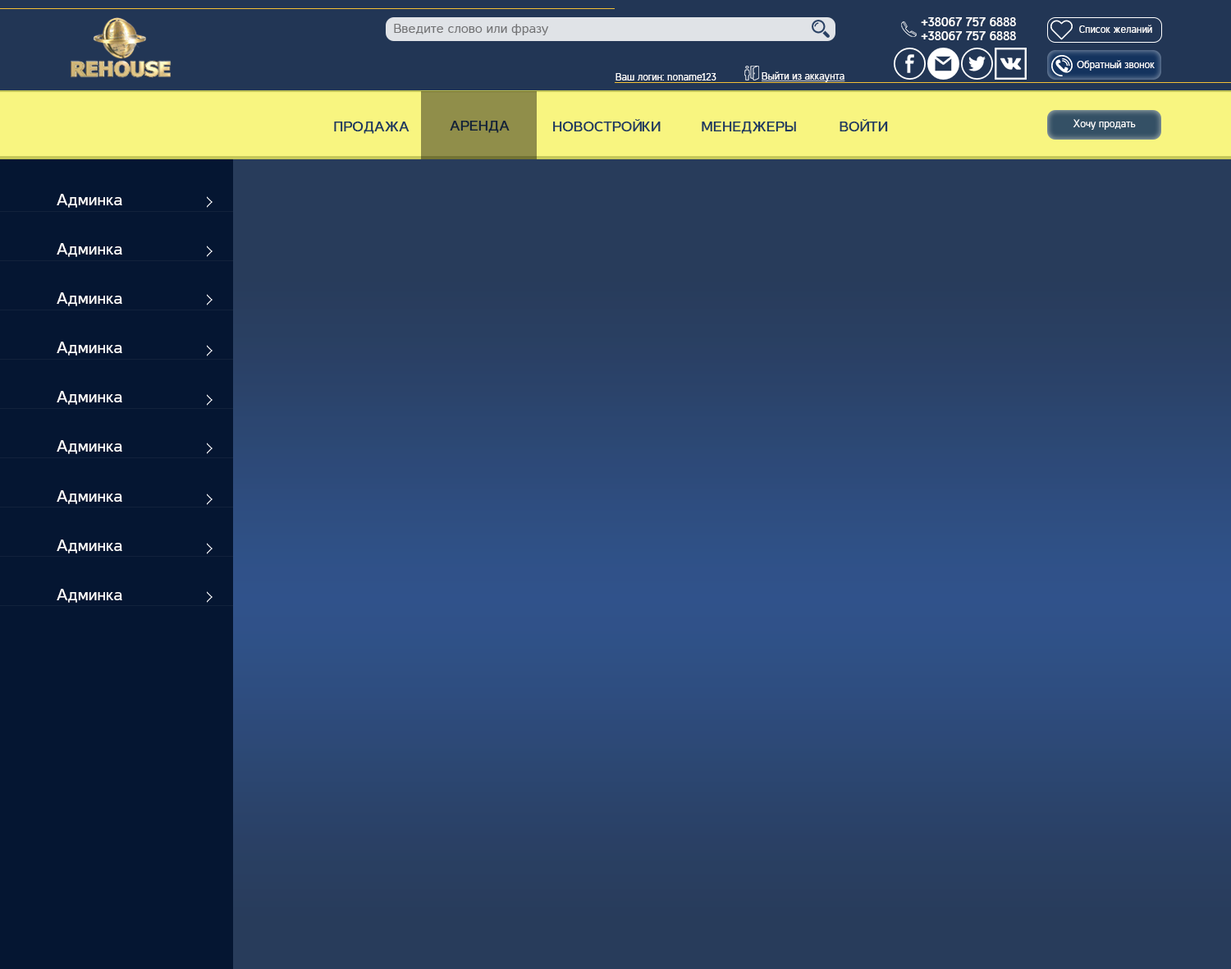
<style>
.page{position:relative;width:1231px;height:969px}
.page>*{position:absolute;margin:0}
.t1{font:13.1px "CasperBold";color:#ffffff}
.t2{font:13.1px "Casper";color:#727274}
.t3{font:13.1px "Casper";color:#727274;text-transform:uppercase}
.t4{font:9.8px "Casper";color:#ffffff}
.t5{font:9.8px "Casper";color:#ffffff;text-decoration:underline}
.t6{font:14.8px "CasperBold";color:#1d3960;text-transform:uppercase}
.t7{font:14.8px "CasperBold";color:#112138;text-transform:uppercase}
.t8{font:16.4px "Casper";color:#ffffff}
</style>
<div class="page">
<p class="t1" style="left:921px;top:17px;width:95px;height:9px">+38067 757 6888</p>
<p class="t2" style="left:394px;top:24px;width:155px;height:11px"><span class="t3">В</span>ведите слово или фразу</p>
<p class="t4" style="left:1079px;top:25px;width:73px;height:8px">Список желаний</p>
<p class="t1" style="left:921px;top:31px;width:95px;height:9px">+38067 757 6888</p>
<p class="t4" style="left:1077px;top:60px;width:78px;height:11px">Обратный звонок</p>
<p class="t4" style="left:616px;top:73px;width:101px;height:7px">Ваш логин: noname123</p>
<p class="t5" style="left:762px;top:71px;width:83px;height:11px">Выйти из аккаунта</p>
<p class="t6" style="left:334px;top:121px;width:76px;height:13px">Продажа</p>
<p class="t7" style="left:450px;top:121px;width:60px;height:12px">аренда</p>
<p class="t6" style="left:553px;top:119px;width:108px;height:12px">новостройки</p>
<p class="t6" style="left:702px;top:121px;width:94px;height:13px">менеджеры</p>
<p class="t6" style="left:840px;top:119px;width:48px;height:12px">войти</p>
<p class="t4" style="left:1073px;top:119px;width:63px;height:11px">Хочу продать</p>
<p class="t8" style="left:57px;top:194px;width:65px;height:14px">Админка</p>
<p class="t8" style="left:57px;top:243px;width:65px;height:14px">Админка</p>
<p class="t8" style="left:57px;top:292px;width:65px;height:14px">Админка</p>
<p class="t8" style="left:57px;top:341px;width:65px;height:14px">Админка</p>
<p class="t8" style="left:57px;top:391px;width:65px;height:14px">Админка</p>
<p class="t8" style="left:57px;top:440px;width:65px;height:14px">Админка</p>
<p class="t8" style="left:57px;top:490px;width:65px;height:14px">Админка</p>
<p class="t8" style="left:57px;top:539px;width:65px;height:14px">Админка</p>
<p class="t8" style="left:57px;top:589px;width:65px;height:13px">Админка</p>
</div>
